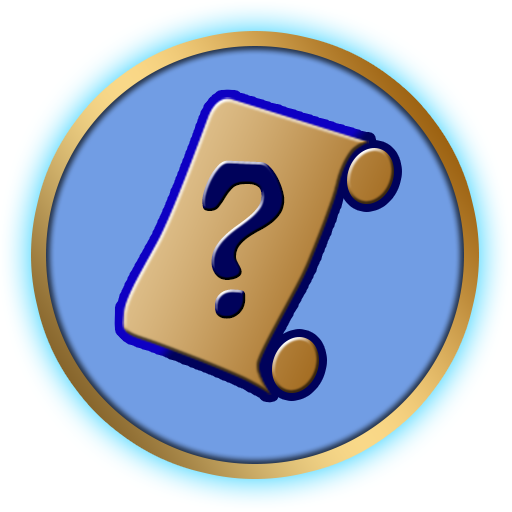
<style>
.page{position:relative;width:512px;height:512px;background:#719de4}
.page>*{position:absolute;margin:0}
.t1{font:250.6px "SeagullWine";color:#00025b}
</style>
<div class="page">
<p class="t1" style="left:202px;top:160px;width:83px;height:159px;rotate:2deg">?</p>
</div>
